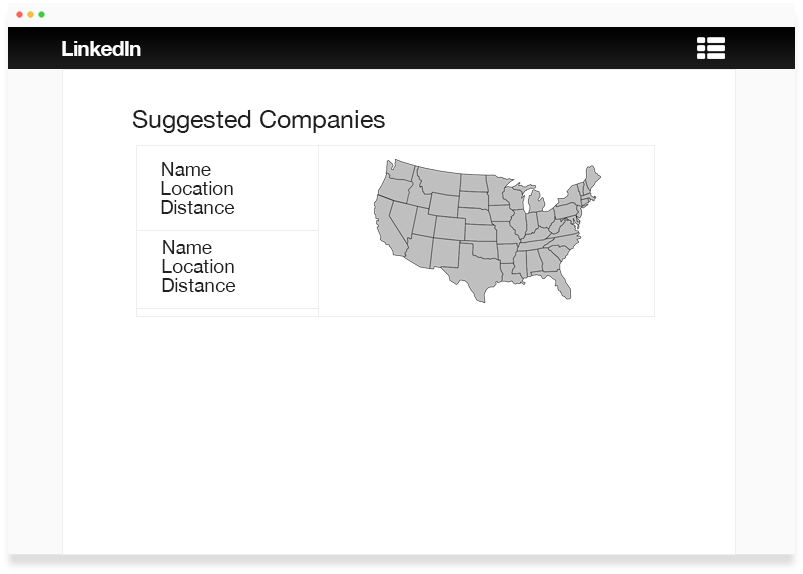
<style>
.page{position:relative;width:803px;height:574px;background:#ffffff}
.page>*{position:absolute;margin:0}
.t1{font:21.3px "HelveticaNeue-Bold";letter-spacing:-0.04em;color:#ffffff}
.t2{font:25px "HelveticaNeue";color:#1f1f1f}
.t3{font:19px "HelveticaNeue";color:#1f1f1f}
</style>
<div class="page">
<p class="t1" style="left:62px;top:41px;width:79px;height:15px">LinkedIn</p>
<p class="t2" style="left:132px;top:110px;width:253px;height:23px">Suggested Companies</p>
<p class="t3" style="left:162px;top:162px;width:49px;height:14px">Name</p>
<p class="t3" style="left:161px;top:181px;width:72px;height:14px">Location</p>
<p class="t3" style="left:161px;top:200px;width:74px;height:14px">Distance</p>
<p class="t3" style="left:163px;top:240px;width:49px;height:14px">Name</p>
<p class="t3" style="left:162px;top:259px;width:72px;height:14px">Location</p>
<p class="t3" style="left:162px;top:278px;width:74px;height:14px">Distance</p>
</div>
